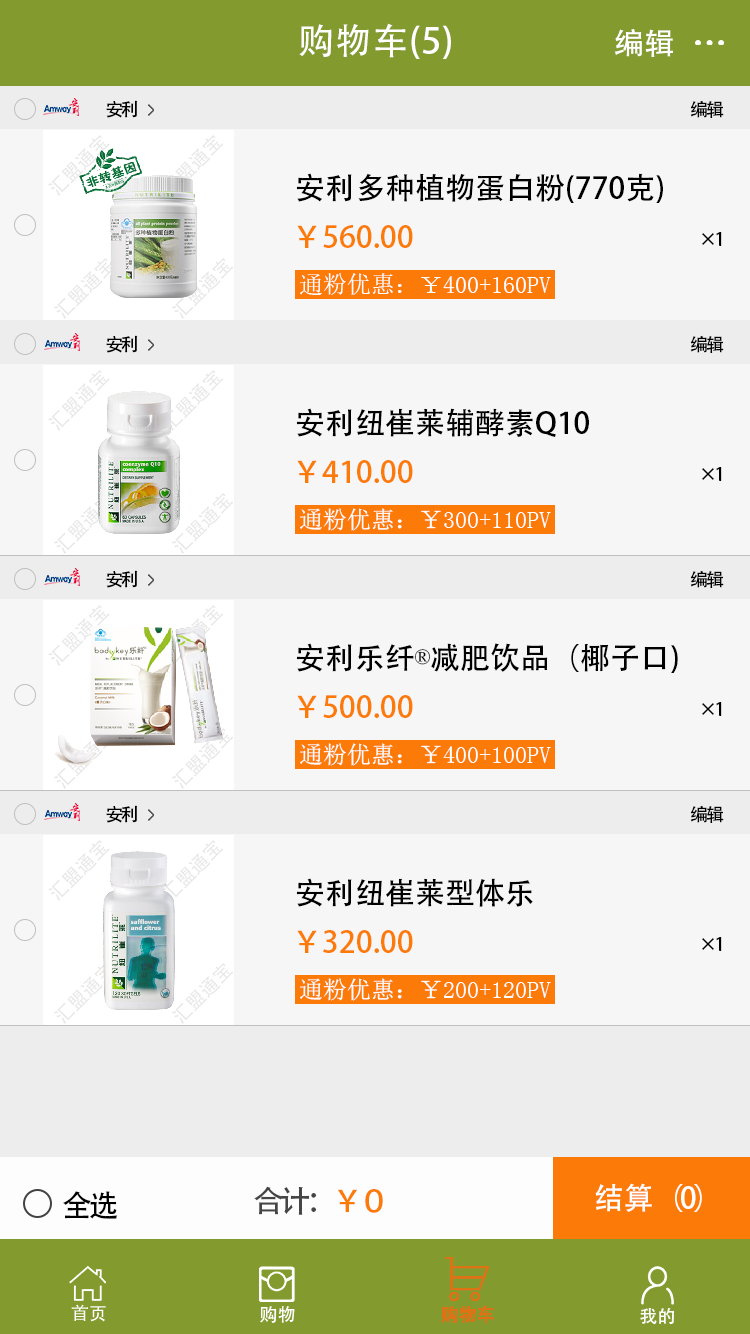
<style>
.page{position:relative;width:750px;height:1334px;background:#f6f6f6}
.page>*{position:absolute;margin:0}
.t1{font:36px "AdobeHeitiStd-Regular";letter-spacing:0.02em;color:#ffffff}
.t2{font:30px "AdobeHeitiStd-Regular";letter-spacing:0.02em;color:#ffffff}
.t3{font:18px "AdobeHeitiStd-Regular";letter-spacing:-0.12em;color:#000000}
.t4{font:30px "AdobeHeitiStd-Regular";color:#000000}
.t5{font:30px "AdobeHeitiStd-Regular";color:#fc7b08}
.t6{font:24px "AdobeHeitiStd-Regular";color:#ffffff}
.t7{font:30px "SimSun";color:#000000}
.t8{font:30px "AdobeHeitiStd-Regular";letter-spacing:-0.12em;color:#000000}
.t9{font:30px "AdobeHeitiStd-Regular";letter-spacing:-0.12em;color:#454545}
.t10{font:30px "AdobeHeitiStd-Regular";letter-spacing:-0.12em;color:#fc7b08}
.t11{font:30px "AdobeHeitiStd-Regular";letter-spacing:-0.12em;color:#ffffff}
.t12{font:30px "AdobeHeitiStd-Regular";color:#ffffff}
</style>
<div class="page">
<p class="t1" style="left:299px;top:23px;width:152px;height:36px">购物车(5)</p>
<p class="t2" style="left:614px;top:29px;width:59px;height:28px">编辑</p>
<p class="t3" style="left:106px;top:100px;width:32px;height:18px">安利</p>
<p class="t3" style="left:690px;top:100px;width:34px;height:18px">编辑</p>
<p class="t4" style="left:296px;top:173px;width:367px;height:30px">安利多种植物蛋白粉(770克)</p>
<p class="t5" style="left:297px;top:225px;width:116px;height:23px">￥560.00</p>
<p class="t3" style="left:702px;top:232px;width:20px;height:14px">×1</p>
<p class="t6" style="left:300px;top:273px;width:251px;height:22px">通粉优惠：￥400+160PV</p>
<p class="t3" style="left:106px;top:335px;width:32px;height:18px">安利</p>
<p class="t3" style="left:690px;top:335px;width:34px;height:18px">编辑</p>
<p class="t4" style="left:296px;top:408px;width:293px;height:29px">安利纽崔莱辅酵素Q10</p>
<p class="t5" style="left:297px;top:460px;width:116px;height:23px">￥410.00</p>
<p class="t3" style="left:702px;top:467px;width:20px;height:14px">×1</p>
<p class="t6" style="left:300px;top:508px;width:251px;height:23px">通粉优惠：￥300+110PV</p>
<p class="t3" style="left:106px;top:570px;width:32px;height:18px">安利</p>
<p class="t3" style="left:690px;top:570px;width:34px;height:18px">编辑</p>
<p class="t4" style="left:296px;top:643px;width:382px;height:30px">安利乐纤<span class="t7">®</span>减肥饮品（椰子口)</p>
<p class="t5" style="left:297px;top:695px;width:116px;height:23px">￥500.00</p>
<p class="t3" style="left:702px;top:702px;width:20px;height:14px">×1</p>
<p class="t6" style="left:300px;top:743px;width:251px;height:23px">通粉优惠：￥400+100PV</p>
<p class="t3" style="left:106px;top:805px;width:32px;height:18px">安利</p>
<p class="t3" style="left:690px;top:805px;width:34px;height:18px">编辑</p>
<p class="t4" style="left:296px;top:878px;width:237px;height:29px">安利纽崔莱型体乐</p>
<p class="t5" style="left:297px;top:930px;width:116px;height:23px">￥320.00</p>
<p class="t3" style="left:702px;top:937px;width:20px;height:14px">×1</p>
<p class="t6" style="left:300px;top:978px;width:251px;height:23px">通粉优惠：￥200+120PV</p>
<p class="t8" style="left:63px;top:1191px;width:55px;height:28px">全选</p>
<p class="t9" style="left:254px;top:1186px;width:129px;height:29px">合计：<span class="t10">￥０</span></p>
<p class="t11" style="left:595px;top:1183px;width:107px;height:29px"><span class="t12">结算</span>（0）</p>
</div>
